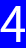
<style>
.page{position:relative;width:26px;height:48px;background:#0000ff}
.page>*{position:absolute;margin:0}
.t1{font:47.6px "KozGoPr6N-Regular";color:#ffffff}
</style>
<div class="page">
<p class="t1" style="left:0px;top:6px;width:25px;height:36px">4</p>
</div>
